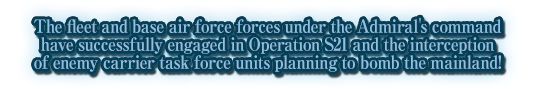
<style>
.page{position:relative;width:536px;height:89px;background:#053f55}
.page>*{position:absolute;margin:0}
.t1{font:18px/18px "RyuminPro-ExBold";letter-spacing:-0.04em;color:#93bee0;scale:0.9 1}
</style>
<div class="page">
<p class="t1" style="left:34px;top:17px;width:467px;height:55px;text-align:center">The fleet and base air force forces under the Admiral's command<br>have successfully engaged in Operation S21 and the interception<br>of enemy carrier task force units planning to bomb the mainland!</p>
</div>
